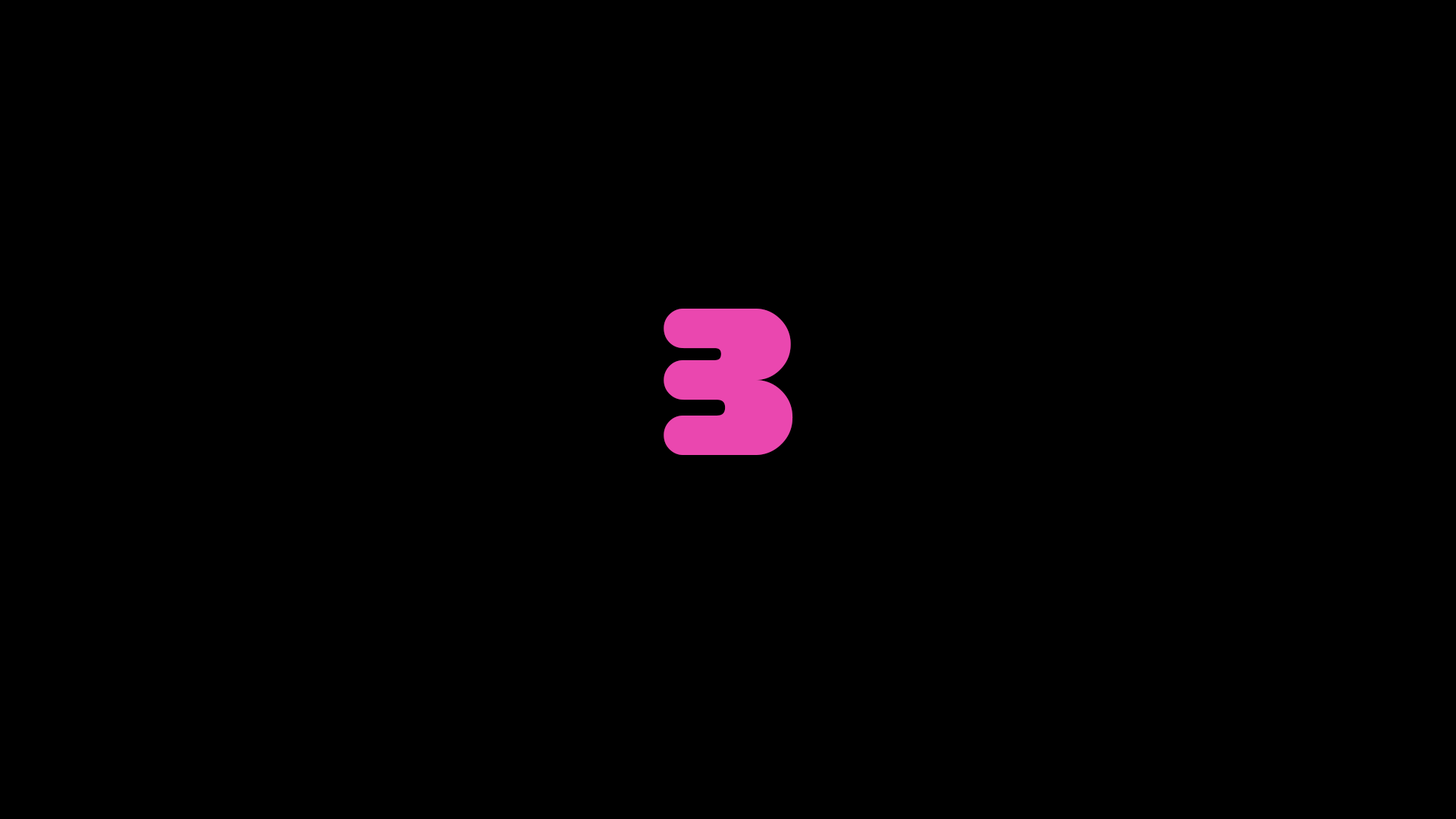
<style>
.page{position:relative;width:1456px;height:819px;background:#000000}
.page>*{position:absolute;margin:0}
.t1{font:303.3px "Billo";color:#ea47af}
</style>
<div class="page">
<p class="t1" style="left:664px;top:309px;width:129px;height:146px">3</p>
</div>
